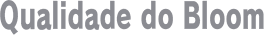
<style>
.page{position:relative;width:264px;height:38px;background:#ffffff}
.page>*{position:absolute;margin:0}
.t1{font:36px "RodinPro-EB";letter-spacing:-0.001em;color:#8b8c92;scale:0.69 1}
</style>
<div class="page">
<p class="t1" style="left:0px;top:0px;width:264px;height:35px">Qualidade do Bloom</p>
</div>
